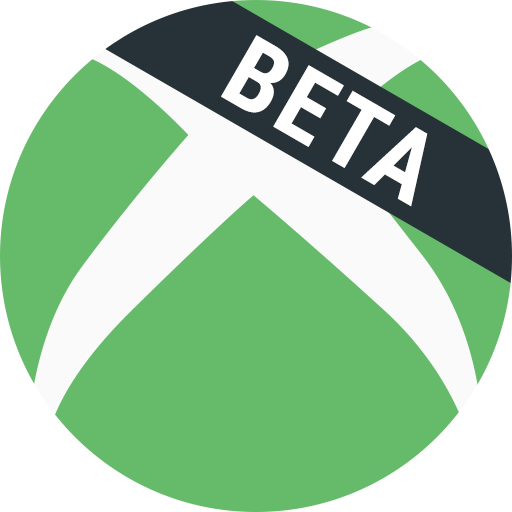
<style>
.page{position:relative;width:512px;height:512px;background:#66bb6a}
.page>*{position:absolute;margin:0}
.t1{font:100px "RobotoCondensed-Bold";letter-spacing:0.04em;color:#ffffff}
</style>
<div class="page">
<p class="t1" style="left:221px;top:35px;width:207px;height:172px;rotate:30deg">BETA</p>
</div>
